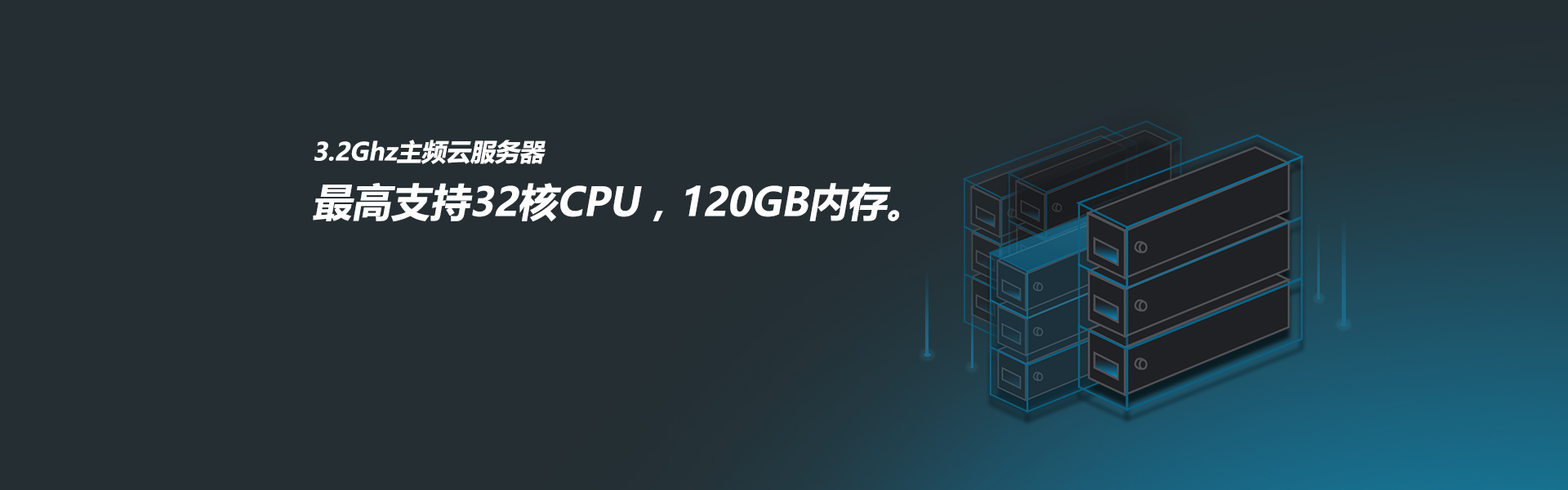
<style>
.page{position:relative;width:1568px;height:490px;background:#252e33}
.page>*{position:absolute;margin:0}
.t1{font:39.2px "MicrosoftYaHei-Bold";color:#fefefe;font-style:italic}
.t2{font:24.5px "MicrosoftYaHei-Bold";color:#fefefe;font-style:italic}
</style>
<div class="page">
<p class="t1" style="left:313px;top:140px;width:586px;height:82px"><span class="t2">3.2Ghz主频云服务器<br></span>最高支持32核CPU，120GB内存。</p>
</div>
